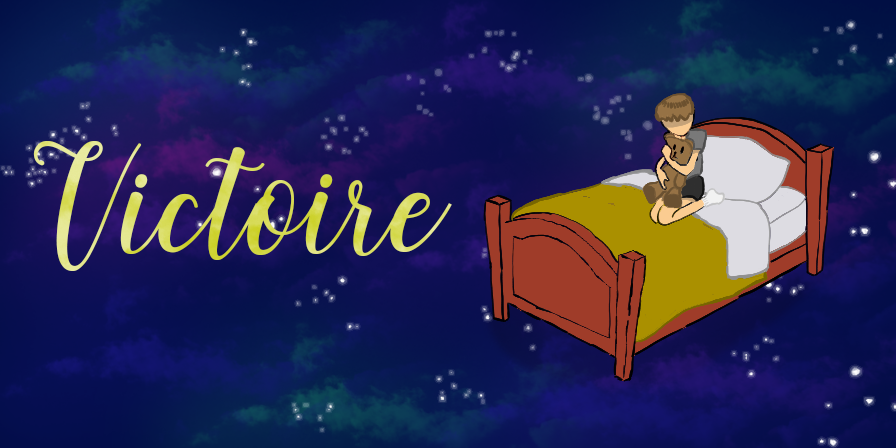
<style>
.page{position:relative;width:896px;height:448px}
.page>*{position:absolute;margin:0}
.t1{font:150px "mydream"}
</style>
<div class="page">
<p class="t1" style="left:33px;top:141px;width:419px;height:130px">Victoire</p>
</div>
